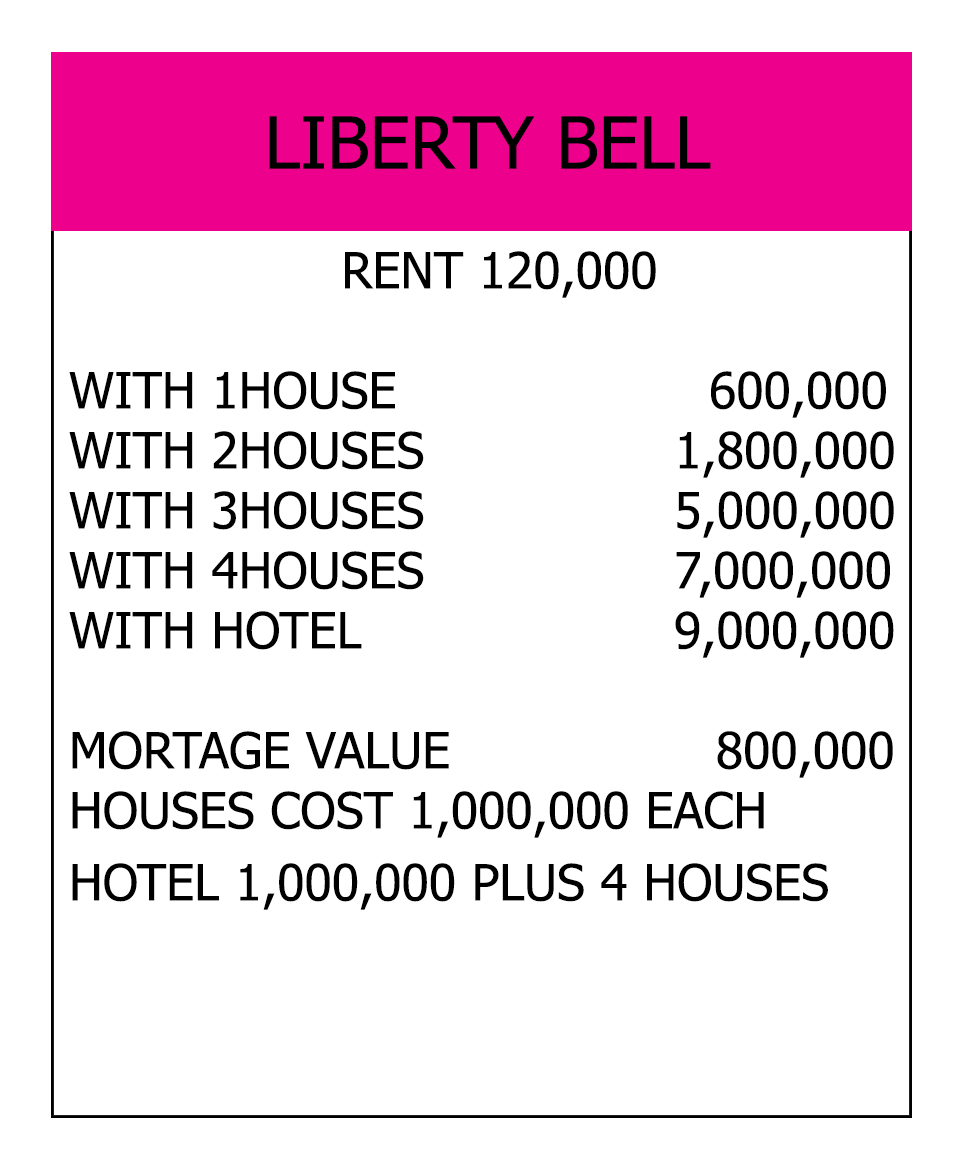
<style>
.page{position:relative;width:966px;height:1164px;background:#ffffff}
.page>*{position:absolute;margin:0}
.t1{font:72px "Tahoma";color:#000000}
.t2{font:50px "Tahoma";color:#010000}
</style>
<div class="page">
<p class="t1" style="left:269px;top:116px;width:442px;height:53px">LIBERTY BELL</p>
<p class="t2" style="left:69px;top:251px;width:825px;height:659px;text-align:center">RENT 120,000<br><br>WITH 1HOUSE                    600,000<br>WITH 2HOUSES                1,800,000<br>WITH 3HOUSES                5,000,000<br>WITH 4HOUSES                7,000,000<br>WITH HOTEL                    9,000,000<br><br>MORTAGE VALUE                 800,000<br>HOUSES COST 1,000,000 EACH<br>HOTEL 1,000,000 PLUS 4 HOUSES</p>
</div>
